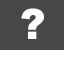
<style>
.page{position:relative;width:64px;height:64px;background:#474747}
.page>*{position:absolute;margin:0}
.t1{font:72px "Arial-Black";color:#ffffff}
</style>
<div class="page">
<p class="t1" style="left:21px;top:8px;width:23px;height:31px">?</p>
</div>
